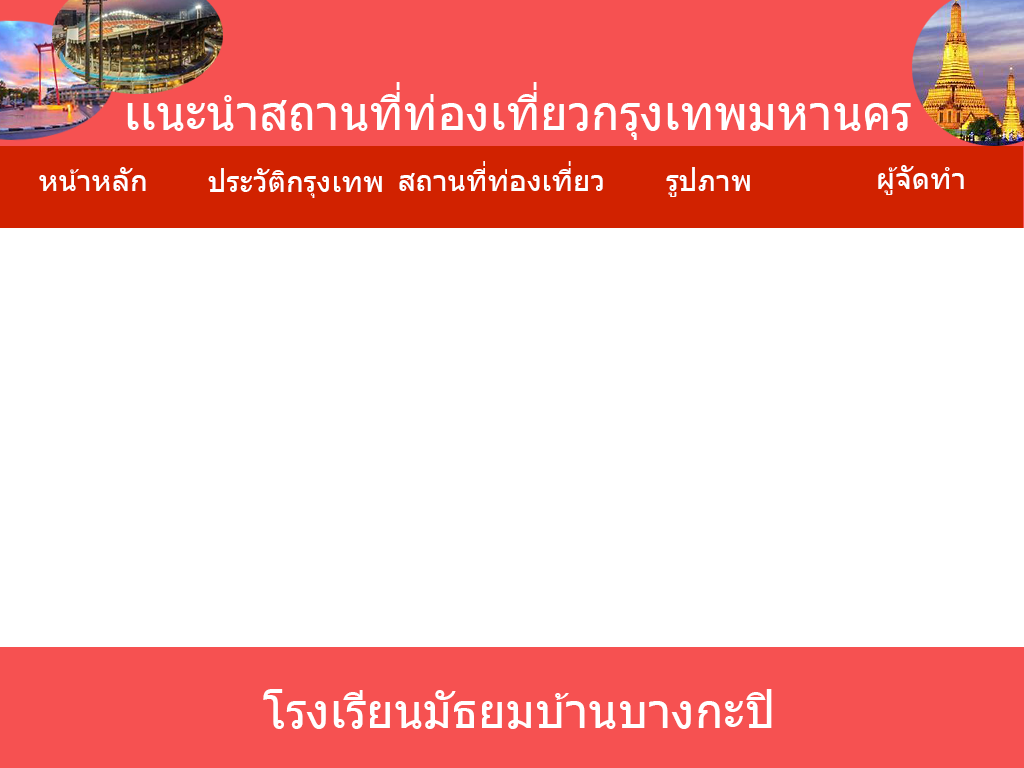
<style>
.page{position:relative;width:1024px;height:768px;background:#ffffff}
.page>*{position:absolute;margin:0}
.t1{font:48px "Tahoma";color:#ffffff}
.t2{font:30px "Tahoma";color:#ffffff}
</style>
<div class="page">
<p class="t1" style="left:127px;top:82px;width:784px;height:58px">เเนะนำสถานที่ท่องเที่ยวกรุงเทพมหานคร</p>
<p class="t2" style="left:399px;top:161px;width:204px;height:30px">สถานที่ท่องเที่ยว</p>
<p class="t2" style="left:39px;top:167px;width:107px;height:24px">หน้าหลัก</p>
<p class="t2" style="left:208px;top:168px;width:174px;height:30px">ประวัติกรุงเทพ</p>
<p class="t2" style="left:666px;top:167px;width:84px;height:30px">รูปภาพ</p>
<p class="t2" style="left:878px;top:165px;width:86px;height:30px">ผู้จัดทำ</p>
<p class="t1" style="left:263px;top:689px;width:509px;height:40px">โรงเรียนมัธยมบ้านบางกะปิ</p>
</div>
